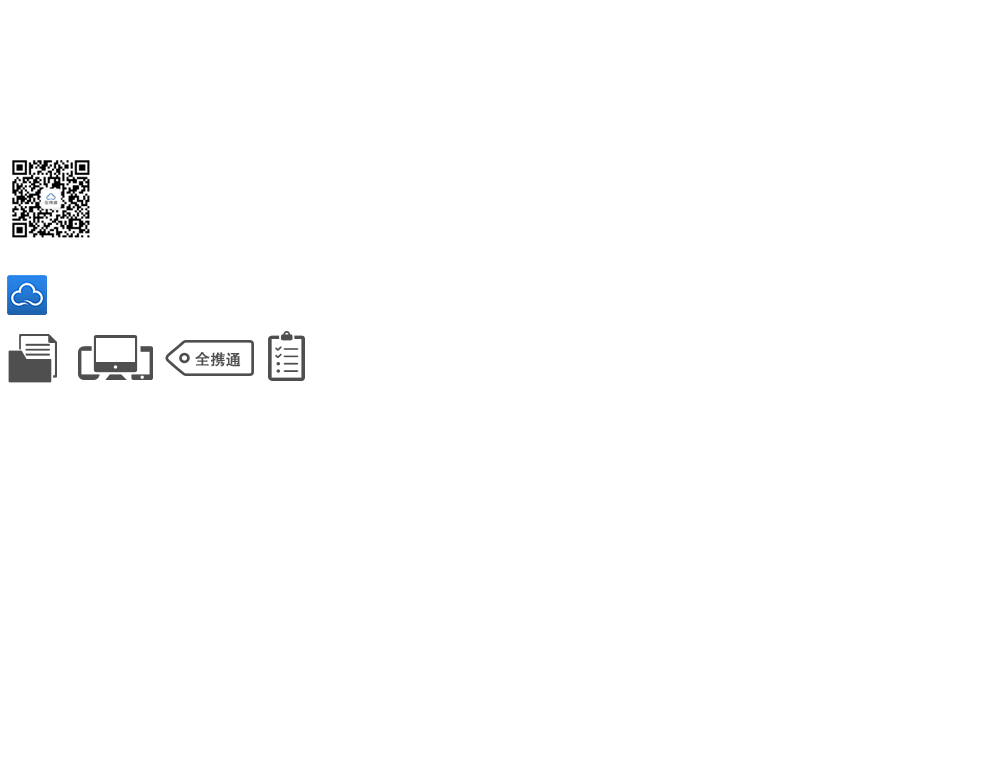
<style>
.page{position:relative;width:1000px;height:763px;background:#ffffff}
.page>*{position:absolute;margin:0}
.t1{font:15.2px "AdobeHeitiStd-Regular";letter-spacing:-0.02em;color:#4f4f4f;font-weight:bold}
</style>
<div class="page">
<p class="t1" style="left:195px;top:352px;width:46px;height:15px">全携通</p>
</div>
